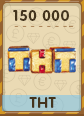
<style>
.page{position:relative;width:84px;height:116px;background:#eadab4}
.page>*{position:absolute;margin:0}
.t1{font:15px "RotondaC-Bold";letter-spacing:0.04em;color:#43341d;text-transform:uppercase}
</style>
<div class="page">
<p class="t1" style="left:13px;top:10px;width:56px;height:11px">150 000</p>
<p class="t1" style="left:29px;top:97px;width:27px;height:11px">ТНТ</p>
</div>
